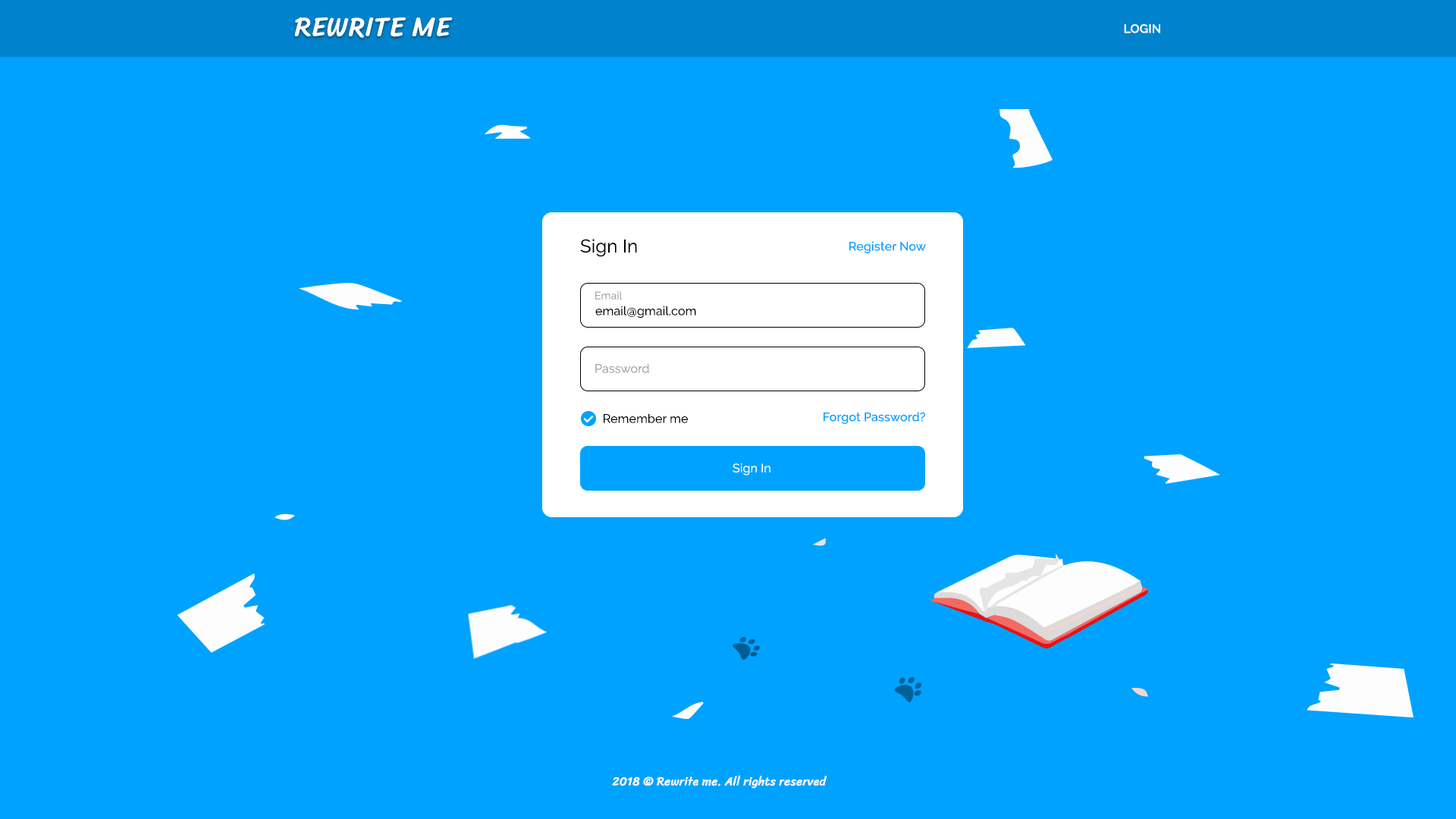
<style>
.page{position:relative;width:1456px;height:819px;background:#00a2ff}
.page>*{position:absolute;margin:0}
.t1{font:27.3px "SrirachaCyrillic";letter-spacing:0.01em;color:#ffffff}
.t2{font:12.1px "Raleway-SemiBold";letter-spacing:0.01em;color:#ffffff}
.t3{font:18.2px "Raleway-Regular";letter-spacing:0.01em;color:#000000}
.t4{font:12.1px "Raleway-Medium";letter-spacing:0.01em;color:#00a2ff}
.t5{font:10.6px "Raleway-Regular";letter-spacing:0.01em;color:#a3a3a3}
.t6{font:12.1px "Raleway-Regular";letter-spacing:0.01em;color:#000000}
.t7{font:12.1px "Raleway-Regular";letter-spacing:0.01em;color:#a3a3a3}
.t8{font:12.1px "Raleway-Regular";letter-spacing:0.01em;color:#ffffff}
.t9{font:12.1px "SrirachaCyrillic";letter-spacing:0.01em;color:#ffffff}
</style>
<div class="page">
<p class="t1" style="left:294px;top:17px;width:159px;height:21px">REWRITE ME</p>
<p class="t2" style="left:1124px;top:24px;width:36px;height:9px">LOGIN</p>
<p class="t3" style="left:580px;top:239px;width:57px;height:18px">Sign In</p>
<p class="t3" style="left:580px;top:239px;width:57px;height:18px">Sign In</p>
<p class="t4" style="left:849px;top:241px;width:77px;height:12px">Register Now</p>
<p class="t4" style="left:849px;top:241px;width:77px;height:12px">Register Now</p>
<p class="t5" style="left:595px;top:291px;width:28px;height:9px">Email</p>
<p class="t6" style="left:595px;top:306px;width:101px;height:12px">email@gmail.com</p>
<p class="t7" style="left:595px;top:363px;width:54px;height:10px">Password</p>
<p class="t7" style="left:595px;top:363px;width:54px;height:10px">Password</p>
<p class="t6" style="left:604px;top:413px;width:84px;height:10px">Remember me</p>
<p class="t6" style="left:604px;top:413px;width:84px;height:10px">Remember me</p>
<p class="t4" style="left:824px;top:412px;width:101px;height:12px">Forgot Password?</p>
<p class="t4" style="left:824px;top:412px;width:101px;height:12px">Forgot Password?</p>
<p class="t8" style="left:733px;top:463px;width:37px;height:12px">Sign In</p>
<p class="t8" style="left:733px;top:463px;width:37px;height:12px">Sign In</p>
<p class="t9" style="left:612px;top:775px;width:215px;height:14px">2018 © Rewrite me. All rights reserved</p>
</div>
